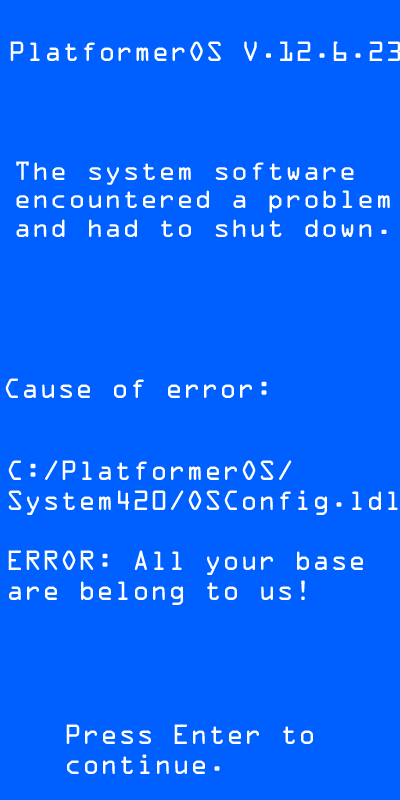
<style>
.page{position:relative;width:400px;height:800px;background:#0060ff}
.page>*{position:absolute;margin:0}
.t1{font:24.9px "OCRAStd";color:#ffffff}
.t2{font:23.7px "OCRAStd";color:#ffffff;scale:1.06 1}
.t3{font:25px "OCRAStd";color:#ffffff}
</style>
<div class="page">
<p class="t1" style="left:10px;top:41px;width:391px;height:20px">PlatformerOS V.12.6.23</p>
<p class="t2" style="left:16px;top:161px;width:374px;height:76px">The system software<br>encountered a problem<br>and had to shut down.</p>
<p class="t3" style="left:5px;top:378px;width:262px;height:20px">Cause of error:</p>
<p class="t3" style="left:8px;top:460px;width:390px;height:145px">C:/PlatformerOS/<br>System420/OSConfig.ldl<br><br>ERROR: All your base<br>are belong to us!</p>
<p class="t3" style="left:66px;top:724px;width:247px;height:50px">Press Enter to<br>continue.</p>
</div>
